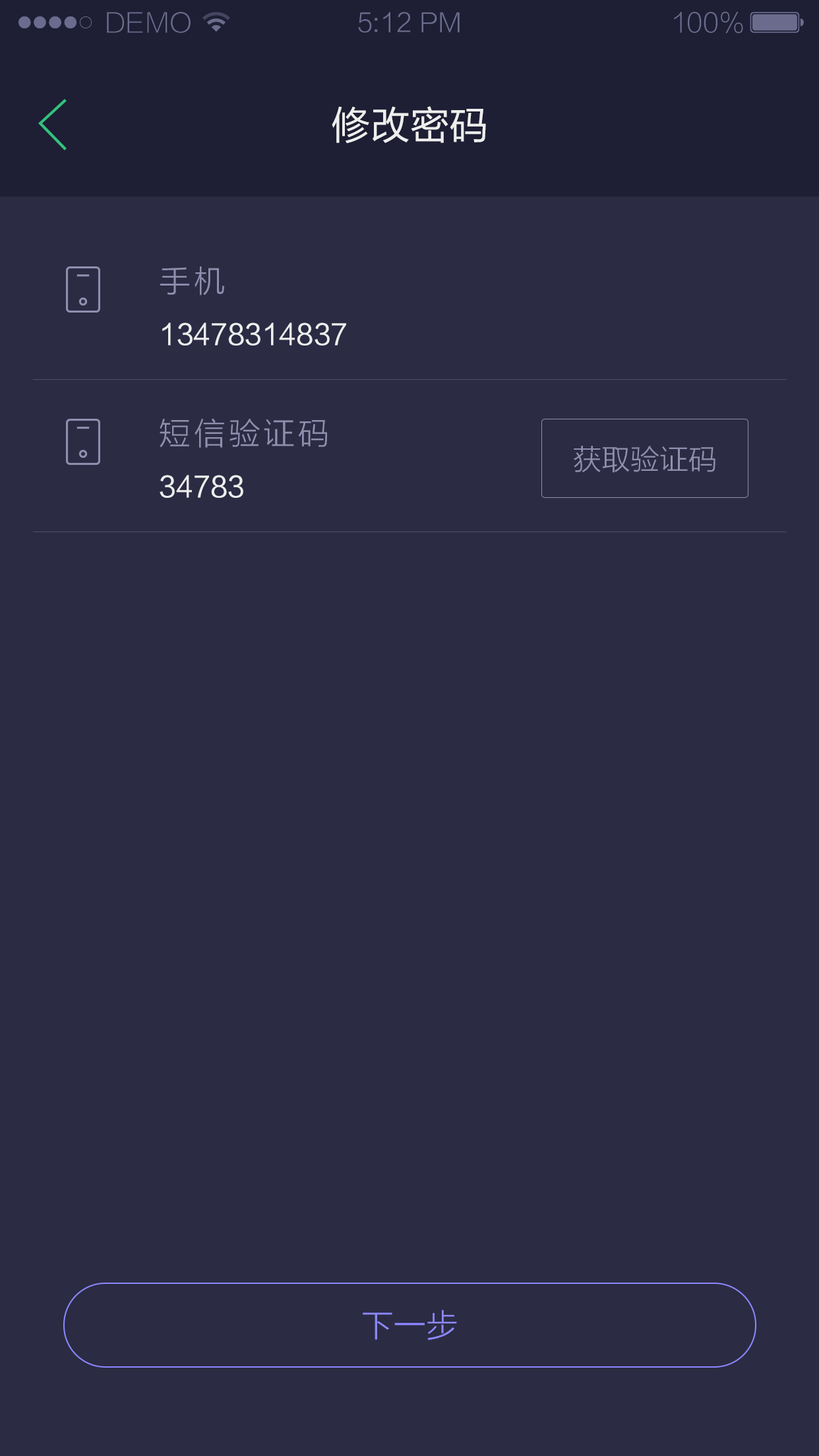
<style>
.page{position:relative;width:819px;height:1456px;background:#2b2b44}
.page>*{position:absolute;margin:0}
.t1{font:26.2px "FZLTXHK--GBK1-0";color:#6b6b8d;text-transform:uppercase}
.t2{font:26.2px "FZLTXHK";color:#6b6b8d}
.t3{font:26.2px "FZLTXHK--GBK1-0";color:#6b6b8d}
.t4{font:39.3px "FZLTHJW--GB1-0";color:#eeeeee;text-transform:uppercase}
.t5{font:31.7px "FZLTXHK";letter-spacing:0.1em;color:#908fae}
.t6{font:28.2px "FZLTHJW--GB1-0";color:#eeeeee}
.t7{font:29px "FZLTXHK";color:#908fae}
.t8{font:32.3px "FZLTXHK";color:#8c88ff}
</style>
<div class="page">
<p class="t1" style="left:107px;top:12px;width:84px;height:21px">demo</p>
<p class="t2" style="left:358px;top:12px;width:102px;height:21px">5:12 PM</p>
<p class="t3" style="left:674px;top:11px;width:69px;height:23px">100%</p>
<p class="t4" style="left:332px;top:106px;width:154px;height:38px">修改密码</p>
<p class="t5" style="left:160px;top:266px;width:64px;height:29px">手机</p>
<p class="t6" style="left:162px;top:322px;width:184px;height:24px">13478314837</p>
<p class="t5" style="left:160px;top:418px;width:167px;height:30px">短信验证码</p>
<p class="t7" style="left:574px;top:446px;width:141px;height:27px">获取验证码</p>
<p class="t6" style="left:160px;top:475px;width:83px;height:23px">34783</p>
<p class="t8" style="left:363px;top:1310px;width:94px;height:30px">下一步</p>
</div>
